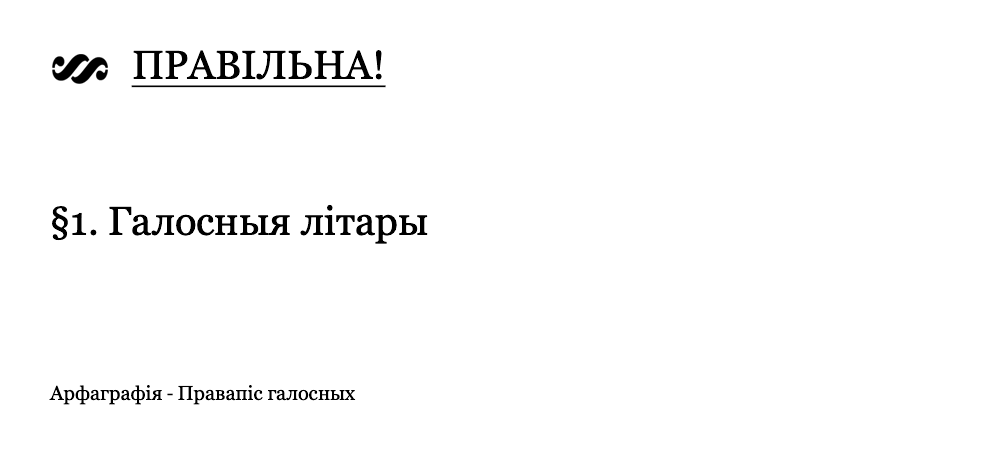
<style>
.page{position:relative;width:1000px;height:450px;background:#ffffff}
.page>*{position:absolute;margin:0}
.t1{font:40px "Georgia";color:#000000;text-transform:uppercase;text-decoration:underline}
.t2{font:40px "Georgia";color:#000000}
.t3{font:20px "Georgia";color:#000000}
.t4{font:20px "MyriadPro-Regular";color:#000000}
</style>
<div class="page">
<p class="t1" style="left:131px;top:50px;width:255px;height:38px">Правільна!</p>
<p class="t2" style="left:52px;top:204px;width:376px;height:40px">§1. Галосныя літары</p>
<p class="t3" style="left:49px;top:385px;width:307px;height:20px">Арфаграфія <span class="t4">- </span>Правапіс галосных</p>
</div>
